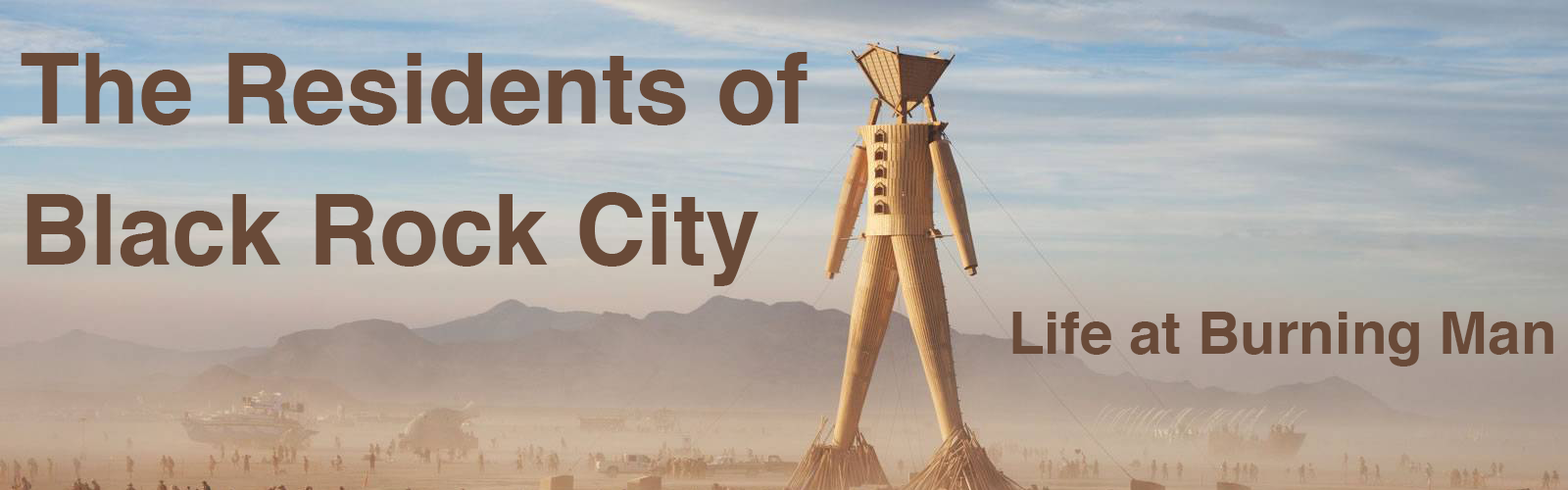
<style>
.page{position:relative;width:1568px;height:490px}
.page>*{position:absolute;margin:0}
.t1{font:98px/70.6px "Helvetica-Bold";color:#694a38}
.t2{font:58.8px "Helvetica-Bold";color:#694a38}
</style>
<div class="page">
<p class="t1" style="left:21px;top:52px;width:787px;height:234px">The Residents of<br> <br>Black Rock City</p>
<p class="t2" style="left:1012px;top:312px;width:541px;height:55px">Life at Burning Man</p>
</div>
